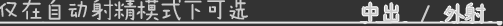
<style>
.page{position:relative;width:503px;height:26px;background:#333333}
.page>*{position:absolute;margin:0}
.t1{font:26px "¢è?";color:#cacaca}
.t2{font:24px "¢è?";color:#cacaca}
</style>
<div class="page">
<p class="t1" style="left:0px;top:0px;width:248px;height:21px">仅在自动射精模式下可选</p>
<p class="t2" style="left:362px;top:2px;width:37px;height:20px">中出</p>
<p class="t2" style="left:444px;top:3px;width:41px;height:20px">外射</p>
</div>
